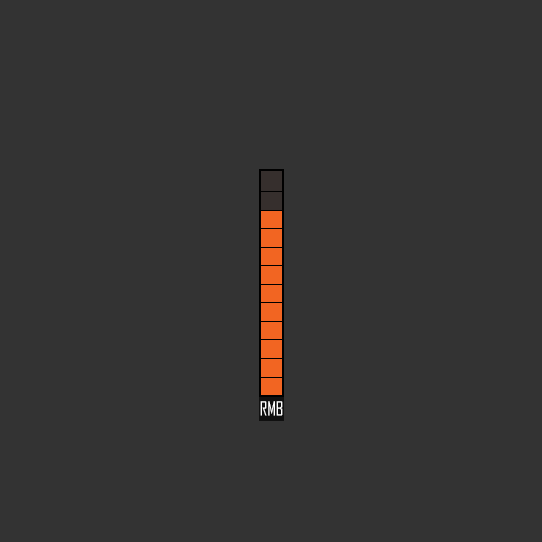
<style>
.page{position:relative;width:542px;height:542px;background:#333333}
.page>*{position:absolute;margin:0}
.t1{font:18.8px "AgencyFB-Reg";color:#ffffff;scale:0.92 1}
</style>
<div class="page">
<p class="t1" style="left:260px;top:401px;width:23px;height:15px">RMB</p>
</div>
